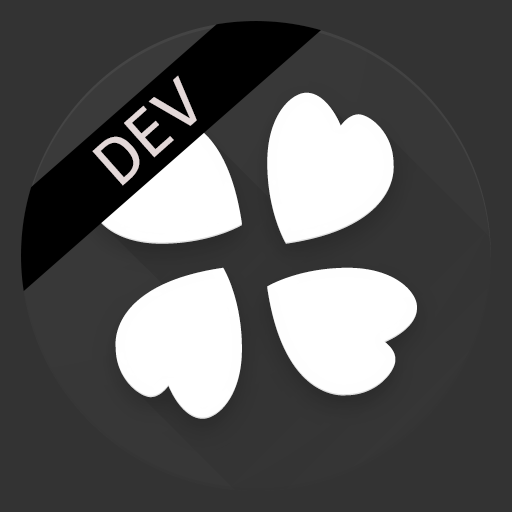
<style>
.page{position:relative;width:512px;height:512px;background:#333333}
.page>*{position:absolute;margin:0}
.t1{font:72px "Consolas";color:#e3d8d8}
</style>
<div class="page">
<p class="t1" style="left:92px;top:75px;width:105px;height:111px;rotate:-42deg">DEV</p>
</div>
